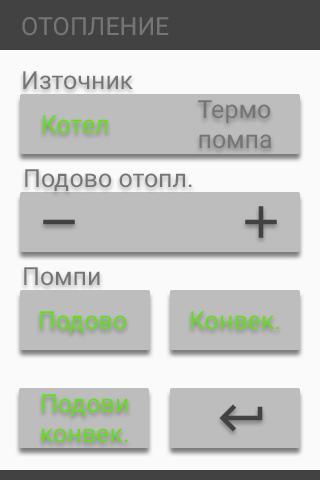
<style>
.page{position:relative;width:320px;height:480px;background:#fafafa}
.page>*{position:absolute;margin:0}
.t1{font:25px "Roboto-Regular";color:#757575}
.t2{font:25px "Roboto-Regular";color:#64dd17}
</style>
<div class="page">
<p class="t1" style="left:22px;top:17px;width:147px;height:19px">ОТОПЛЕНИЕ</p>
<p class="t1" style="left:23px;top:71px;width:110px;height:19px">Източник</p>
<p class="t1" style="left:198px;top:100px;width:74px;height:49px">Термо<br>помпа</p>
<p class="t2" style="left:43px;top:115px;width:65px;height:19px">Котел</p>
<p class="t1" style="left:25px;top:169px;width:167px;height:22px">Подово отопл.</p>
<p class="t1" style="left:24px;top:267px;width:76px;height:19px">Помпи</p>
<p class="t2" style="left:40px;top:311px;width:87px;height:22px">Подово</p>
<p class="t2" style="left:191px;top:311px;width:88px;height:19px">Конвек.</p>
<p class="t2" style="left:42px;top:394px;width:86px;height:49px">Подови<br>конвек.</p>
</div>
